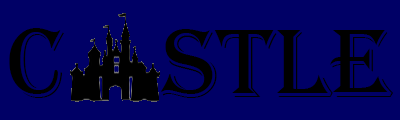
<style>
.page{position:relative;width:400px;height:120px;background:#000066}
.page>*{position:absolute;margin:0}
.t1{font:100px "Algerian";color:#000000}
</style>
<div class="page">
<p class="t1" style="left:9px;top:28px;width:55px;height:70px">c</p>
<p class="t1" style="left:161px;top:29px;width:232px;height:69px">stle</p>
</div>
